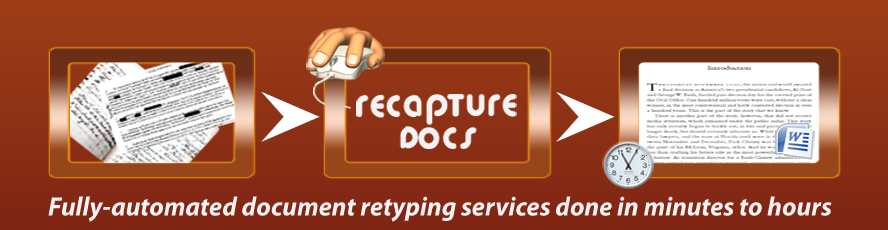
<style>
.page{position:relative;width:888px;height:230px}
.page>*{position:absolute;margin:0}
.t1{font:26.7px "MyriadPro-BoldIt";color:#f2f2f2}
</style>
<div class="page">
<p class="t1" style="left:48px;top:196px;width:784px;height:26px">Fully-automated document retyping services done in minutes to hours</p>
</div>
